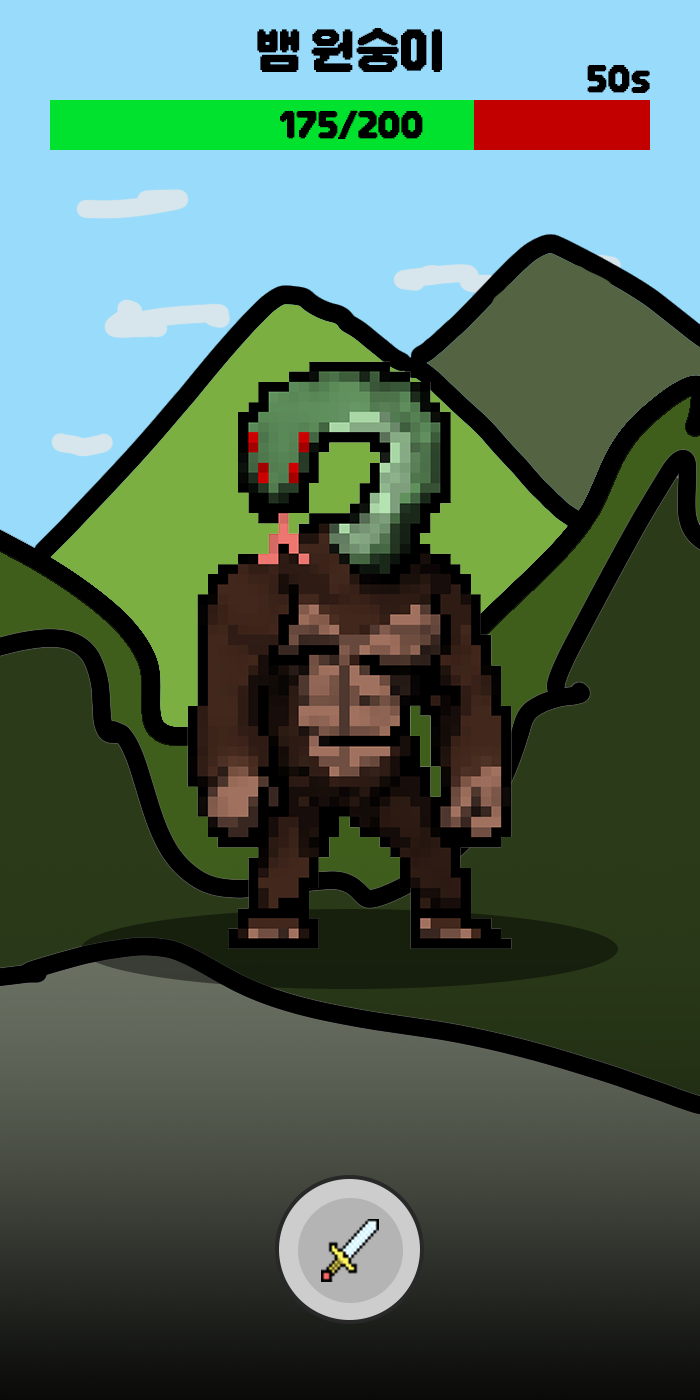
<style>
.page{position:relative;width:700px;height:1400px;background:#98dbfa}
.page>*{position:absolute;margin:0}
.t1{font:57px "DNFBitBitOTF";letter-spacing:-0.02em;color:#000000}
.t2{font:37.8px "DNFBitBitOTF";letter-spacing:-0.02em;color:#000000}
.t3{font:37.7px "DNFBitBitOTF";letter-spacing:-0.02em;color:#000000}
</style>
<div class="page">
<p class="t1" style="left:257px;top:28px;width:185px;height:44px">뱀 원숭이</p>
<p class="t2" style="left:587px;top:65px;width:63px;height:28px">50s</p>
<p class="t3" style="left:280px;top:110px;width:143px;height:29px">175/200</p>
</div>
